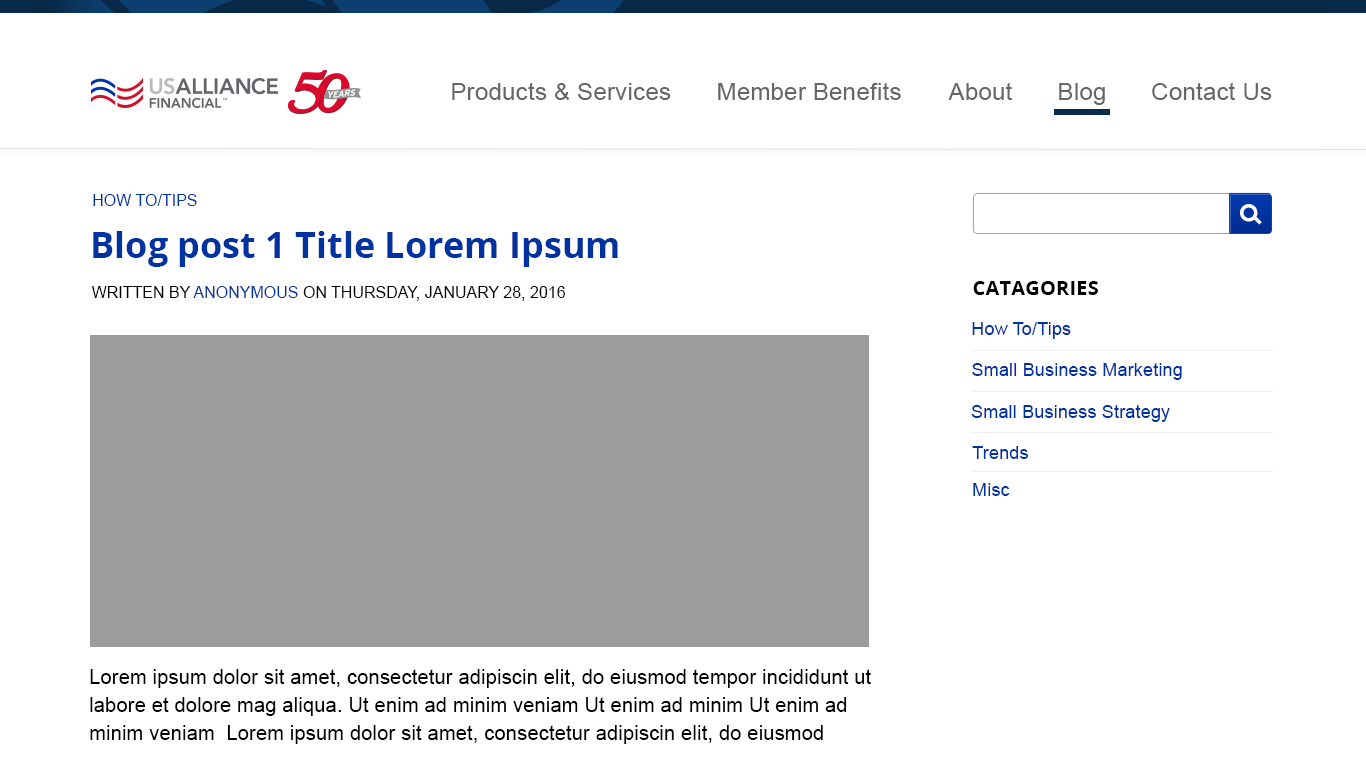
<style>
.page{position:relative;width:1366px;height:768px;background:#ffffff}
.page>*{position:absolute;margin:0}
.t1{font:24px "ArialMT";letter-spacing:0.01em;color:#63666a}
.t2{font:16px "ArialMT";color:#0033a0}
.t3{font:36px "OpenSans-Bold";color:#0033a0}
.t4{font:20px "OpenSans-Bold";letter-spacing:0.01em;color:#000000}
.t5{font:16px "ArialMT";color:#000000}
.t6{font:18px "ArialMT";letter-spacing:0.01em;color:#0033a0}
.t7{font:20px/28px "ArialMT";letter-spacing:0.01em;color:#000000}
</style>
<div class="page">
<p class="t1" style="left:452px;top:82px;width:219px;height:18px">Products &amp; Services</p>
<p class="t1" style="left:718px;top:82px;width:183px;height:18px">Member Benefits</p>
<p class="t1" style="left:948px;top:82px;width:64px;height:18px">About</p>
<p class="t1" style="left:1059px;top:83px;width:46px;height:22px">Blog</p>
<p class="t1" style="left:1152px;top:82px;width:120px;height:18px">Contact Us</p>
<p class="t2" style="left:93px;top:194px;width:104px;height:12px">HOW TO/TIPS</p>
<p class="t3" style="left:93px;top:231px;width:525px;height:36px">Blog post 1 Title Lorem Ipsum</p>
<p class="t4" style="left:973px;top:281px;width:125px;height:14px">CATAGORIES</p>
<p class="t5" style="left:92px;top:286px;width:473px;height:15px">WRITTEN BY <span class="t2">ANONYMOUS </span>ON THURSDAY, JANUARY 28, 2016</p>
<p class="t6" style="left:972px;top:322px;width:99px;height:17px">How To/Tips</p>
<p class="t6" style="left:972px;top:363px;width:210px;height:17px">Small Business Marketing</p>
<p class="t6" style="left:971px;top:405px;width:199px;height:17px">Small Business Strategy</p>
<p class="t6" style="left:972px;top:446px;width:56px;height:13px">Trends</p>
<p class="t6" style="left:973px;top:483px;width:37px;height:13px">Misc</p>
<p class="t7" style="left:90px;top:669px;width:781px;height:75px">Lorem ipsum dolor sit amet, consectetur adipiscin elit, do eiusmod tempor incididunt ut <br>labore et dolore mag aliqua. Ut enim ad minim veniam Ut enim ad minim Ut enim ad <br>minim veniam  Lorem ipsum dolor sit amet, consectetur adipiscin elit, do eiusmod</p>
</div>
